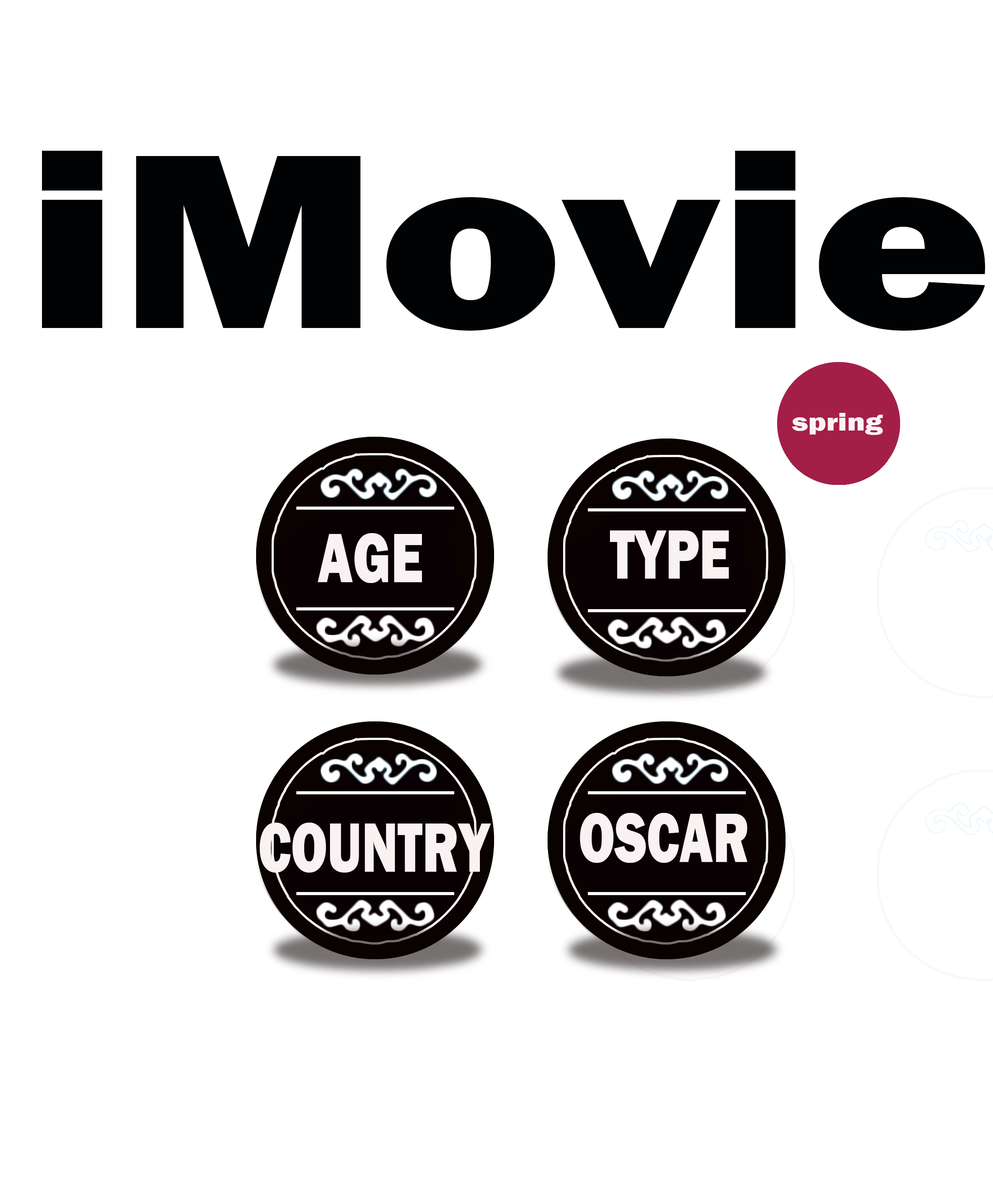
<style>
.page{position:relative;width:993px;height:1201px;background:#ffffff}
.page>*{position:absolute;margin:0}
.t1{font:257.9px "FranklinGothic-Heavy";color:#000204;scale:1.2 1}
.t2{font:71.8px "FranklinGothic-Heavy";color:#f8f2f2;scale:0.77 1}
.t3{font:71.8px "FranklinGothic-Heavy";color:#f8f2f2;scale:0.73 1}
</style>
<div class="page">
<p class="t1" style="left:42px;top:151px;width:943px;height:180px">iMovie</p>
<p class="t2" style="left:317px;top:533px;width:105px;height:50px">AGE</p>
<p class="t3" style="left:610px;top:531px;width:119px;height:48px">TYPE</p>
<p class="t3" style="left:580px;top:813px;width:167px;height:50px">OSCAR</p>
<p class="t3" style="left:260px;top:823px;width:231px;height:50px">COUNTRY</p>
</div>
